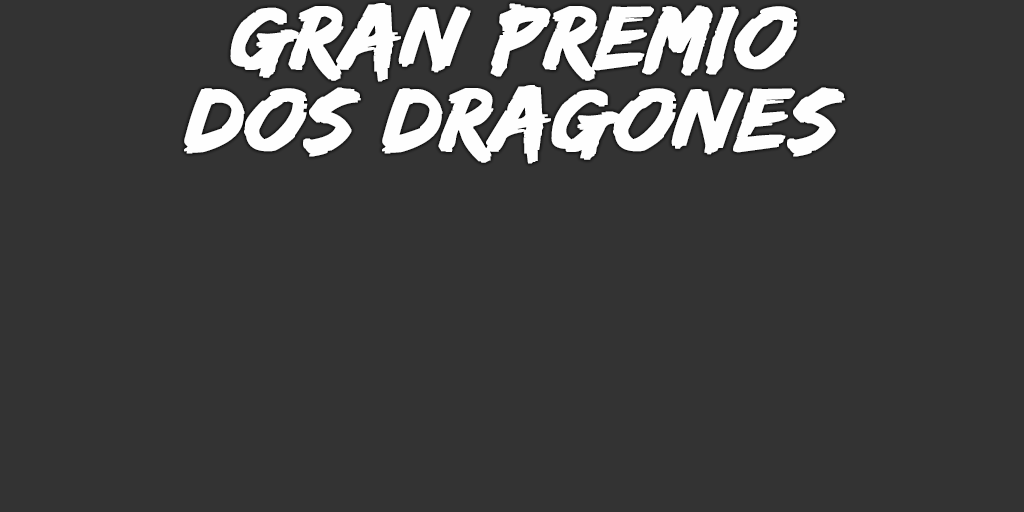
<style>
.page{position:relative;width:1024px;height:512px;background:#333333}
.page>*{position:absolute;margin:0}
.t1{font:93px/82px "EdoSZ";color:#fefefe;font-weight:bold;font-style:italic;scale:1.04 1}
</style>
<div class="page">
<p class="t1" style="left:184px;top:3px;width:661px;height:161px;text-align:center">gran premio<br>dos dragones</p>
</div>
